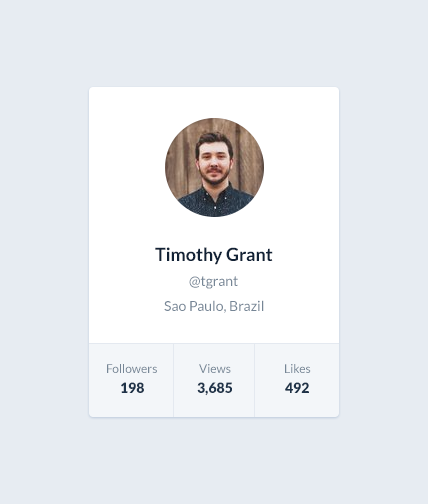
<style>
.page{position:relative;width:428px;height:504px;background:#e7ecf2}
.page>*{position:absolute;margin:0}
.t1{font:18px "Lato-Bold";color:#122236}
.t2{font:14px "Lato-Regular";color:#768696}
.t3{font:12px "Lato-Regular";color:#768696}
.t4{font:14px "Lato-Black";color:#1f3349}
</style>
<div class="page">
<p class="t1" style="left:155px;top:247px;width:118px;height:18px">Timothy Grant</p>
<p class="t2" style="left:189px;top:276px;width:49px;height:13px">@tgrant</p>
<p class="t2" style="left:164px;top:300px;width:100px;height:13px">Sao Paulo, Brazil</p>
<p class="t3" style="left:107px;top:364px;width:50px;height:9px">Followers</p>
<p class="t3" style="left:199px;top:364px;width:32px;height:9px">Views</p>
<p class="t3" style="left:285px;top:364px;width:26px;height:9px">Likes</p>
<p class="t4" style="left:121px;top:382px;width:23px;height:11px">198</p>
<p class="t4" style="left:197px;top:382px;width:35px;height:14px">3,685</p>
<p class="t4" style="left:285px;top:382px;width:24px;height:11px">492</p>
</div>
